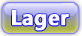
<style>
.page{position:relative;width:82px;height:36px}
.page>*{position:absolute;margin:0}
.t1{font:21.4px "SegoeUI-Bold";color:#fdfafa;font-weight:bold}
</style>
<div class="page">
<p class="t1" style="left:12px;top:10px;width:57px;height:21px">Lager</p>
</div>
